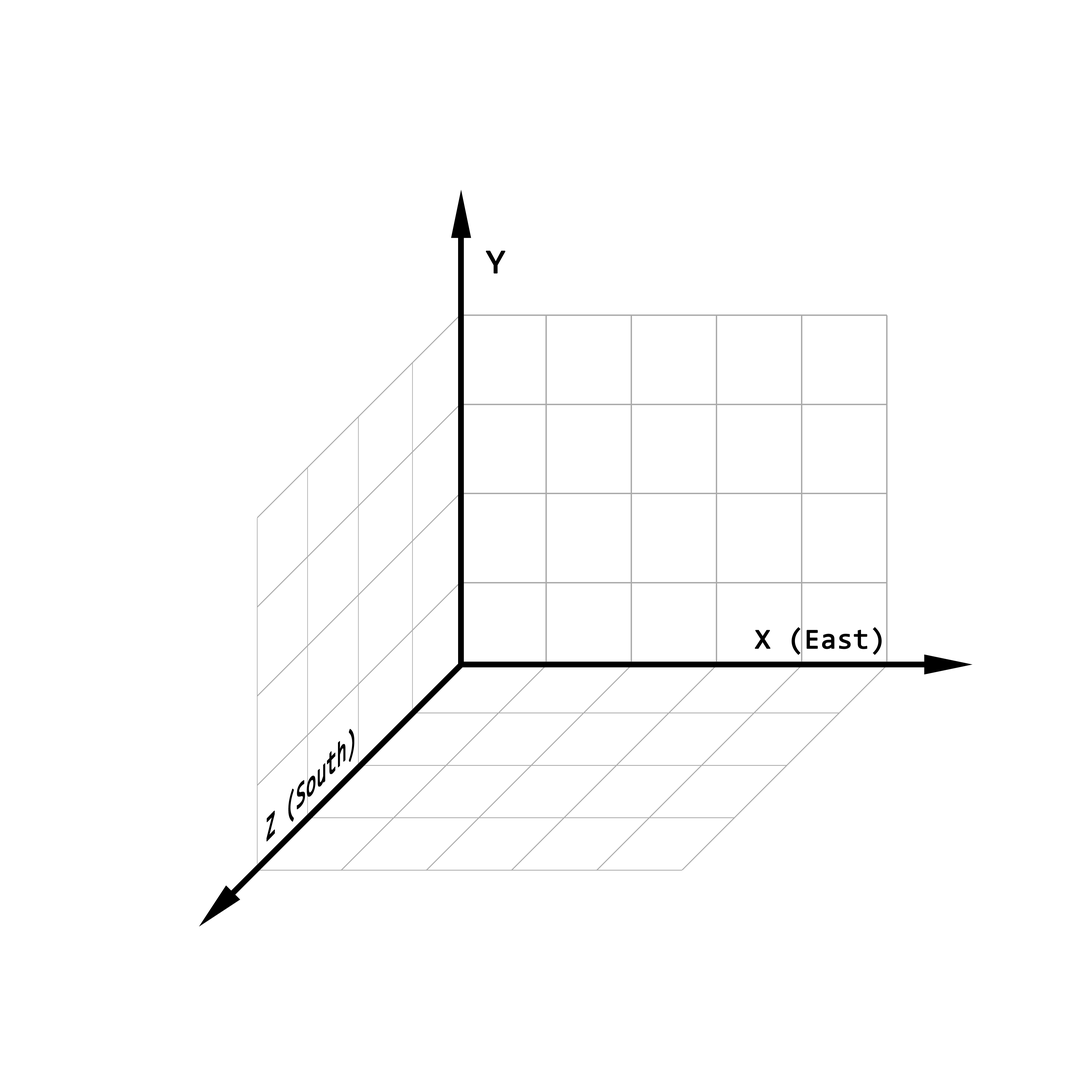
<style>
.page{position:relative;width:1092px;height:1092px;background:#ffffff}
.page>*{position:absolute;margin:0}
.t1{font:34.1px "Consolas";color:#000000;font-weight:bold}
.t2{font:28.4px "Consolas";color:#000000;font-weight:bold}
.t3{font:34.1px "Consolas";color:#000000;font-weight:bold;scale:0.74 1}
</style>
<div class="page">
<p class="t1" style="left:486px;top:251px;width:20px;height:23px">Y</p>
<p class="t2" style="left:755px;top:627px;width:127px;height:28px">X (East)</p>
<p class="t3" style="left:266px;top:729px;width:88px;height:112px;rotate:-46deg">Z (South)</p>
</div>
